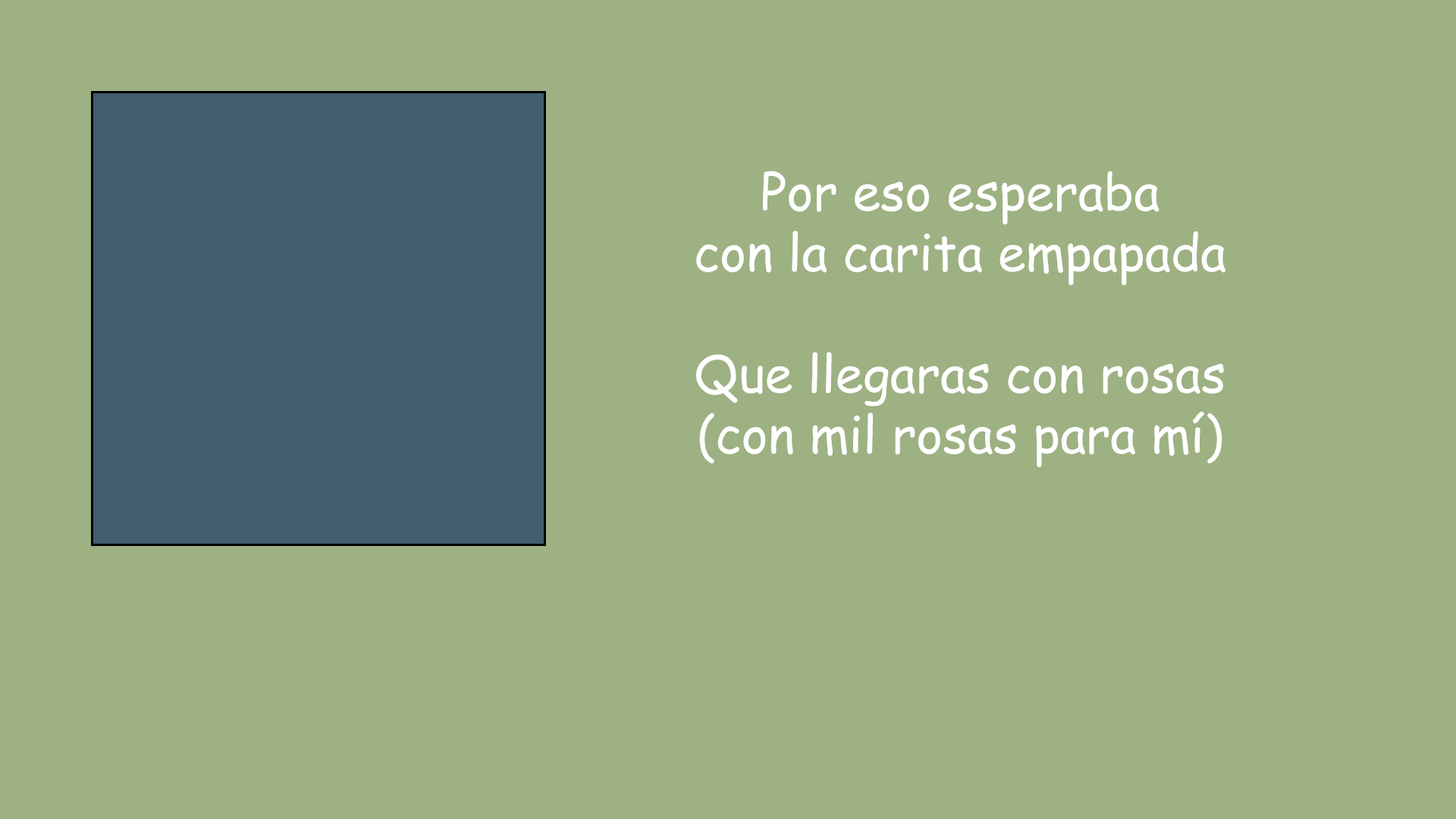
<style>
.page{position:relative;width:1456px;height:819px;background:#9db182}
.page>*{position:absolute;margin:0}
.t1{font:50.6px "ComicSansMS";color:#ffffff}
</style>
<div class="page">
<p class="t1" style="left:696px;top:171px;width:529px;height:296px;text-align:center">Por eso esperaba<br>con la carita empapada<br><br>Que llegaras con rosas<br>(con mil rosas para mí)</p>
</div>
